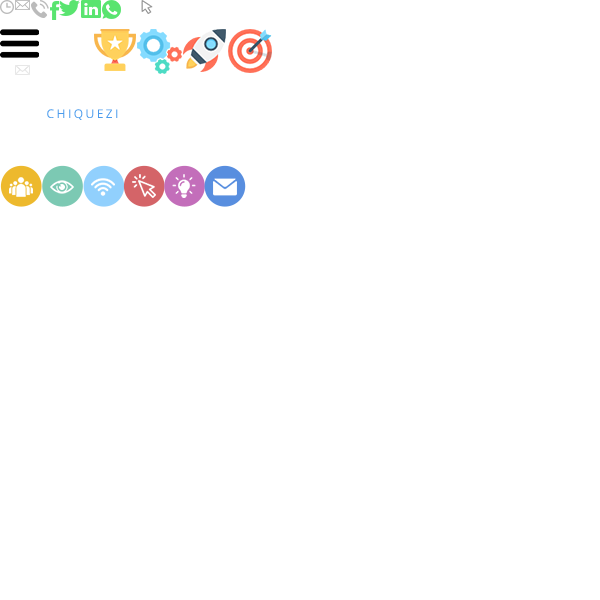
<style>
.page{position:relative;width:600px;height:600px;background:#ffffff}
.page>*{position:absolute;margin:0}
.t1{font:12.1px "OpenSans";letter-spacing:0.2em;color:#4b9bec;text-transform:uppercase}
</style>
<div class="page">
<p class="t1" style="left:47px;top:109px;width:71px;height:11px">Chiquezi</p>
</div>
